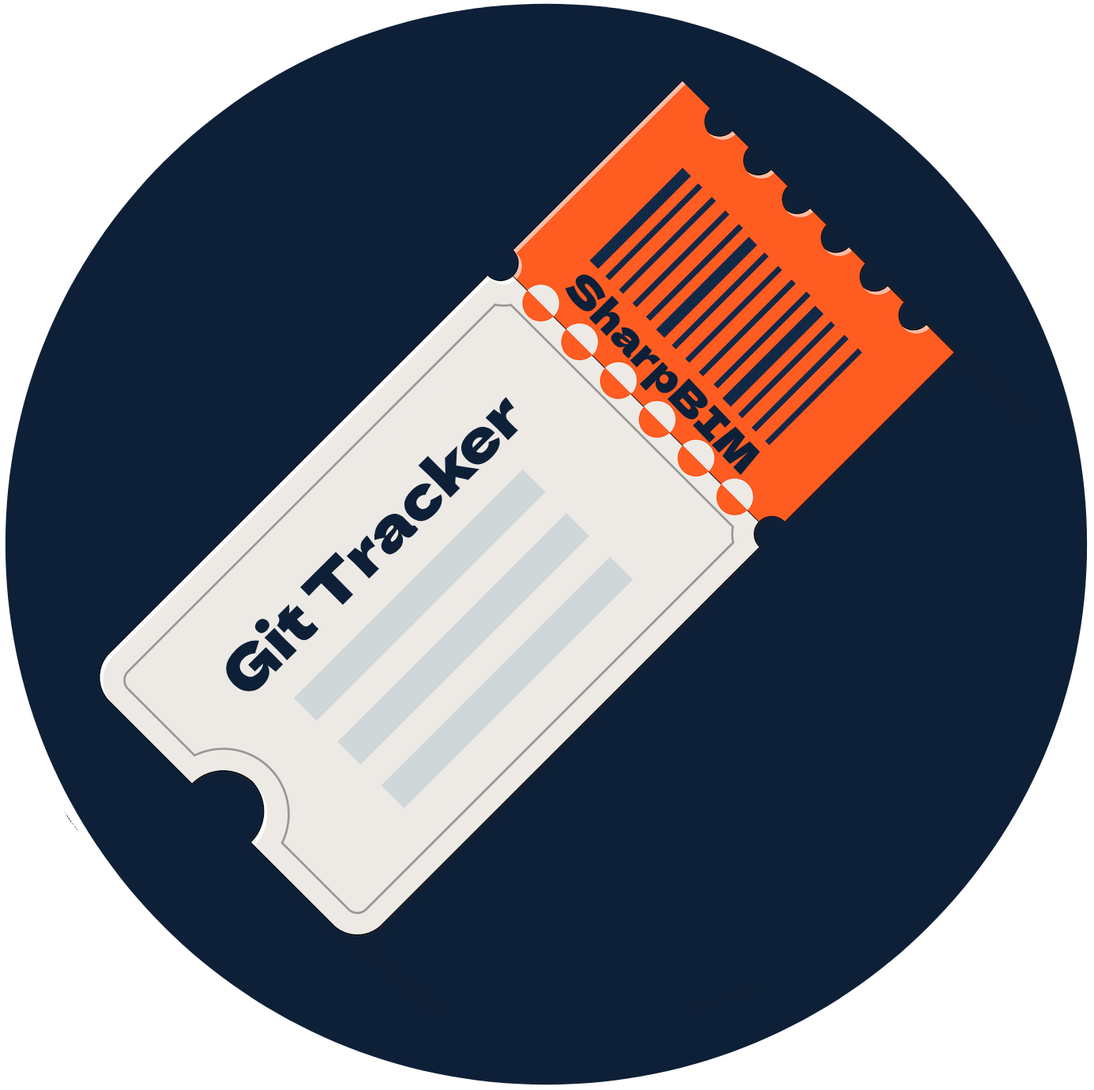
<style>
.page{position:relative;width:1094px;height:1090px;background:#0e2038}
.page>*{position:absolute;margin:0}
.t1{font:41.1px "DelaGothicOne-Regular";color:#0e2038}
.t2{font:58.4px "DelaGothicOne-Regular";color:#0e2038}
</style>
<div class="page">
<p class="t1" style="left:565px;top:273px;width:195px;height:202px;rotate:46deg">SharpBIM</p>
<p class="t2" style="left:226px;top:397px;width:292px;height:295px;rotate:-45deg">Git Tracker</p>
</div>
